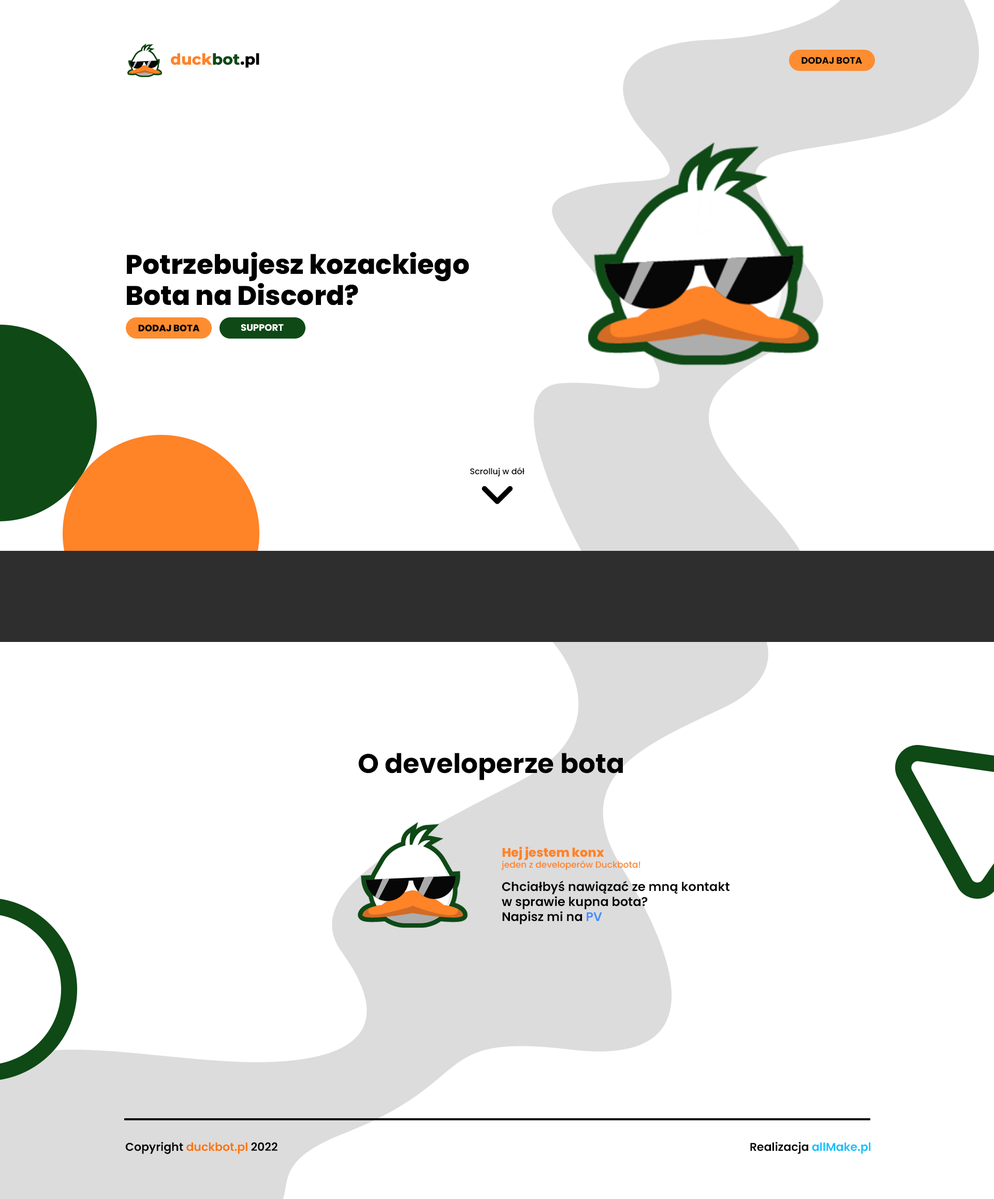
<style>
.page{position:relative;width:994px;height:1199px;background:#ffffff}
.page>*{position:absolute;margin:0}
.t1{font:15.5px "Montserrat-ExtraBold";color:#ff8327}
.t2{font:15.5px "Montserrat-ExtraBold";color:#0e4916}
.t3{font:15.5px "Montserrat-ExtraBold";color:#000000}
.t4{font:9.3px "Poppins-Bold";color:#000000}
.t5{font:26.9px/31.1px "Poppins-ExtraBold";color:#000000}
.t6{font:9.3px "Poppins-ExtraBold";color:#000000}
.t7{font:9.3px "Poppins-Bold";color:#ffffff}
.t8{font:8.3px "Poppins-Medium";color:#000000}
.t9{font:26.9px "Poppins-Bold";color:#000000}
.t10{font:8.8px "Poppins-Medium";color:#ff8327}
.t11{font:12.4px "Poppins-ExtraBold";color:#ff8327}
.t12{font:12.4px "Poppins-SemiBold";color:#000000}
.t13{font:12.4px "Poppins-SemiBold";color:#428eff}
.t14{font:11.4px "Poppins-SemiBold";color:#ff7302}
.t15{font:11.4px "Poppins-SemiBold";color:#000000}
.t16{font:11.4px "Poppins-SemiBold";color:#07c2ff}
</style>
<div class="page">
<p class="t1" style="left:171px;top:53px;width:88px;height:15px">duck<span class="t2">bot</span><span class="t3">.pl</span></p>
<p class="t4" style="left:802px;top:57px;width:60px;height:7px">DODAJ BOTA</p>
<p class="t5" style="left:127px;top:252px;width:342px;height:54px">Potrzebujesz kozackiego<br>Bota na Discord?</p>
<p class="t6" style="left:138px;top:325px;width:62px;height:6px">DODAJ BOTA</p>
<p class="t7" style="left:241px;top:324px;width:43px;height:7px">SUPPORT</p>
<p class="t8" style="left:470px;top:468px;width:55px;height:9px">Scrolluj w dół</p>
<p class="t9" style="left:358px;top:753px;width:265px;height:27px">O developerze bota</p>
<p class="t10" style="left:501px;top:847px;width:140px;height:23px"><span class="t11">Hej jestem konx <br></span>jeden z developerów Duckbota!</p>
<p class="t12" style="left:502px;top:881px;width:228px;height:44px">Chciałbyś nawiązać ze mną kontakt<br>w sprawie kupna bota?<br>Napisz mi na <span class="t13">PV</span></p>
<p class="t14" style="left:125px;top:1142px;width:153px;height:12px"><span class="t15">Copyright </span>duckbot.pl <span class="t15">2022</span></p>
<p class="t15" style="left:750px;top:1142px;width:121px;height:12px">Realizacja <span class="t16">allMake.pl</span></p>
</div>
